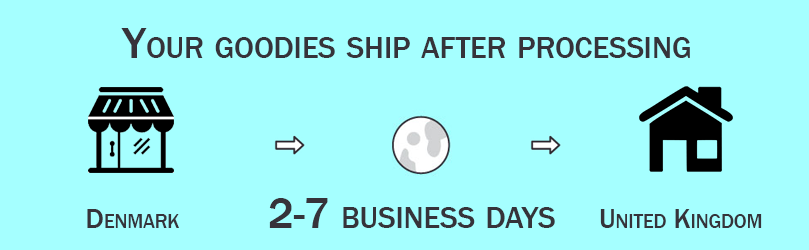
<style>
.page{position:relative;width:809px;height:250px;background:#a5ffff}
.page>*{position:absolute;margin:0}
.t1{font:43.7px "FranklinGothic-Medium";color:#36333a;font-variant:small-caps}
.t2{font:28px "FranklinGothic-Medium";color:#36333a;font-variant:small-caps}
</style>
<div class="page">
<p class="t1" style="left:121px;top:28px;width:569px;height:30px">Your goodies ship after processing</p>
<p class="t1" style="left:269px;top:198px;width:286px;height:30px">2-7 business days</p>
<p class="t2" style="left:87px;top:209px;width:92px;height:19px">Denmark</p>
<p class="t2" style="left:600px;top:209px;width:162px;height:19px">United Kingdom</p>
</div>
